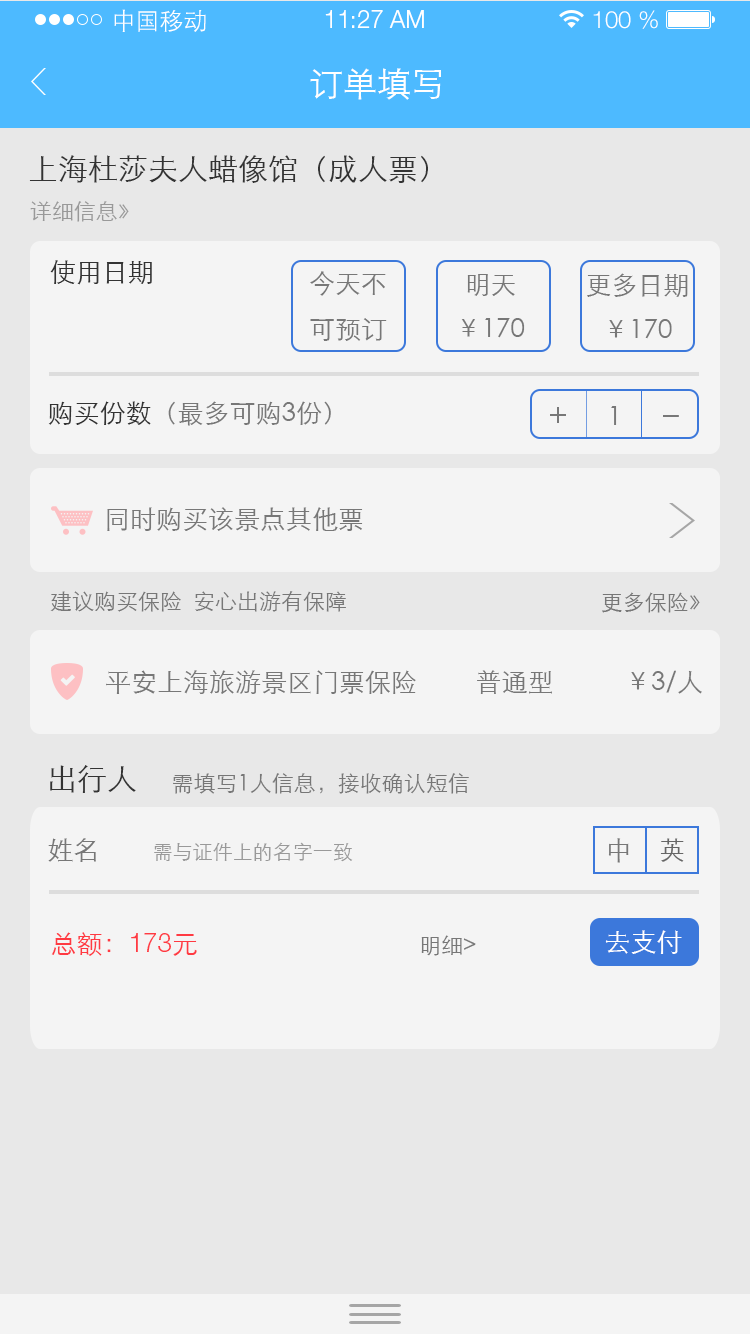
<style>
.page{position:relative;width:750px;height:1334px;background:#f4f4f4}
.page>*{position:absolute;margin:0}
.t1{font:24px "STXihei";color:#ffffff}
.t2{font:24px "HelveticaNeueLTPro-Lt";color:#ffffff}
.t3{font:34px "STXihei";color:#ffffff}
.t4{font:30px "STXihei";color:#333333}
.t5{font:22px "STXihei";color:#999999}
.t6{font:26px "STXihei";color:#333333}
.t7{font:26px "STXihei";color:#777777}
.t8{font:32px "STXihei";color:#777777}
.t9{font:22px "STXihei";color:#777777}
.t10{font:20px "STXihei";color:#999999}
.t11{font:26px "STXihei";color:#666666}
.t12{font:26px "STXihei";color:#ff3a42}
.t13{font:26px "HelveticaNeueLTPro-Lt";color:#ff3a42}
.t14{font:26px "STXihei";color:#ffffff}
</style>
<div class="page">
<p class="t1" style="left:114px;top:9px;width:92px;height:23px">中国移动</p>
<p class="t2" style="left:325px;top:10px;width:99px;height:18px">11:27 AM</p>
<p class="t2" style="left:593px;top:10px;width:65px;height:19px">100 %</p>
<p class="t3" style="left:310px;top:68px;width:131px;height:32px">订单填写</p>
<p class="t4" style="left:29px;top:155px;width:399px;height:28px">上海杜莎夫人蜡像馆（成人票）</p>
<p class="t5" style="left:30px;top:201px;width:99px;height:21px">详细信息》</p>
<p class="t6" style="left:50px;top:260px;width:102px;height:25px">使用日期</p>
<p class="t7" style="left:310px;top:271px;width:77px;height:70px">今天不<br>可预订</p>
<p class="t7" style="left:461px;top:274px;width:64px;height:64px;text-align:center">明天<br>￥170</p>
<p class="t7" style="left:587px;top:273px;width:101px;height:66px;text-align:center">更多日期<br>￥170</p>
<p class="t7" style="left:48px;top:401px;width:283px;height:25px"><span class="t6">购买份数</span>（最多可购3份）</p>
<p class="t8" style="left:550px;top:407px;width:16px;height:16px">＋</p>
<p class="t7" style="left:611px;top:406px;width:6px;height:19px">1</p>
<p class="t8" style="left:663px;top:415px;width:16px;height:2px">－</p>
<p class="t7" style="left:107px;top:507px;width:256px;height:24px">同时购买该景点其他票</p>
<p class="t9" style="left:50px;top:591px;width:296px;height:21px">建议购买保险  安心出游有保障</p>
<p class="t9" style="left:602px;top:592px;width:98px;height:21px">更多保险》</p>
<p class="t7" style="left:106px;top:670px;width:596px;height:24px">平安上海旅游景区门票保险         普通型           ￥3/人</p>
<p class="t4" style="left:50px;top:765px;width:86px;height:28px">出行人</p>
<p class="t9" style="left:173px;top:773px;width:296px;height:21px">需填写1人信息，接收确认短信</p>
<p class="t7" style="left:48px;top:838px;width:48px;height:24px">姓名</p>
<p class="t10" style="left:154px;top:842px;width:199px;height:20px">需与证件上的名字一致</p>
<p class="t7" style="left:608px;top:838px;width:21px;height:25px">中</p>
<p class="t11" style="left:660px;top:838px;width:24px;height:24px">英</p>
<p class="t12" style="left:51px;top:932px;width:146px;height:24px">总额：<span class="t13">173</span>元</p>
<p class="t9" style="left:421px;top:935px;width:55px;height:21px">明细&gt;</p>
<p class="t14" style="left:605px;top:930px;width:77px;height:24px">去支付</p>
</div>
